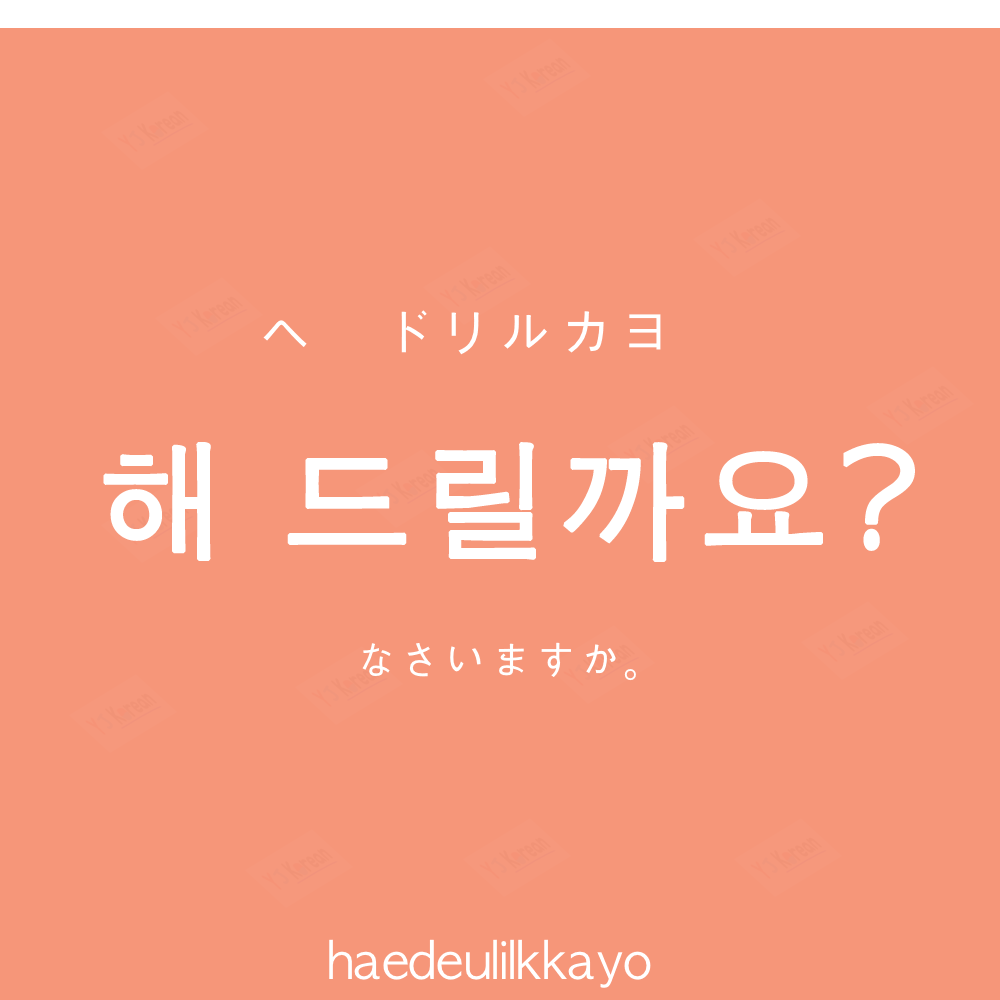
<style>
.page{position:relative;width:1000px;height:1000px;background:#f69679}
.page>*{position:absolute;margin:0}
.t1{font:60px "AppleGothic";color:#ffffff}
.t2{font:130px "AppleGothic";letter-spacing:0.04em;color:#ffffff;font-weight:bold}
.t3{font:45px "AppleGothic";color:#ffffff}
.t4{font:50px "AppleGothic";color:#ffffff}
</style>
<div class="page">
<p class="t1" style="left:263px;top:310px;width:398px;height:45px">ヘ　ドリルカヨ</p>
<p class="t2" style="left:103px;top:442px;width:812px;height:120px">해 드릴까요?</p>
<p class="t3" style="left:362px;top:642px;width:274px;height:39px">なさいますか。</p>
<p class="t4" style="left:329px;top:939px;width:322px;height:49px">haedeulilkkayo</p>
</div>
